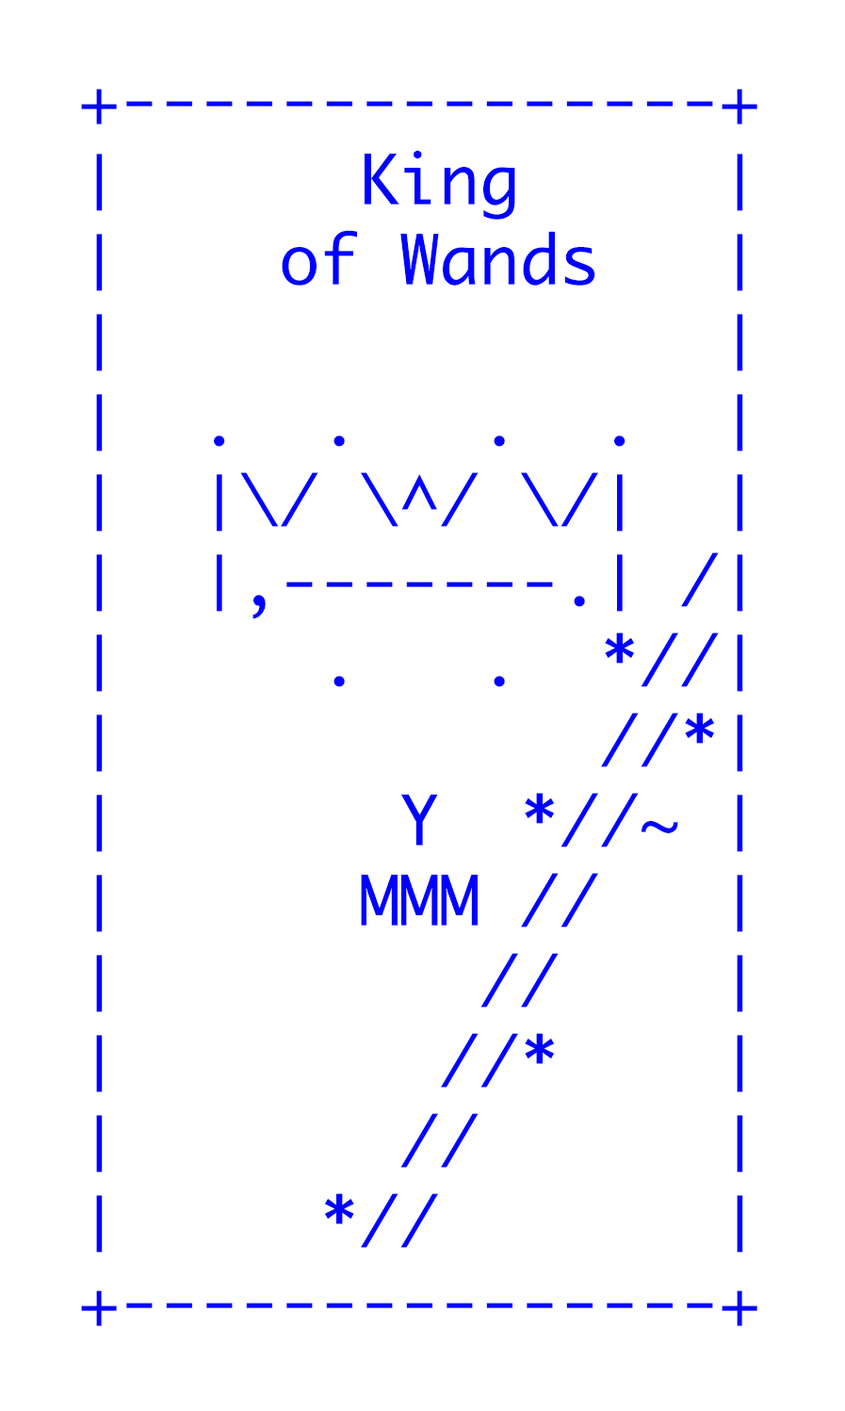
<style>
.page{position:relative;width:845px;height:1411px;background:#ffffff}
.page>*{position:absolute;margin:0}
.t1{font:66.7px "Monaco";color:#0000ff}
</style>
<div class="page">
<p class="t1" style="left:81px;top:89px;width:677px;height:1237px">+---------------+<br>│      King     │<br>│    of Wands   │<br>│               │<br>│  .  .   .  .  │<br>│  │\/ \^/ \/│  │<br>│  │,-------.│ /│<br>│     .   .  *//│ <br>│            //*│ <br>│       Y  *//~ │<br>│      MMM //   │ <br>│         //    │ <br>│        //*    │<br>│       //      │<br>│     *//       │<br>+---------------+</p>
</div>
